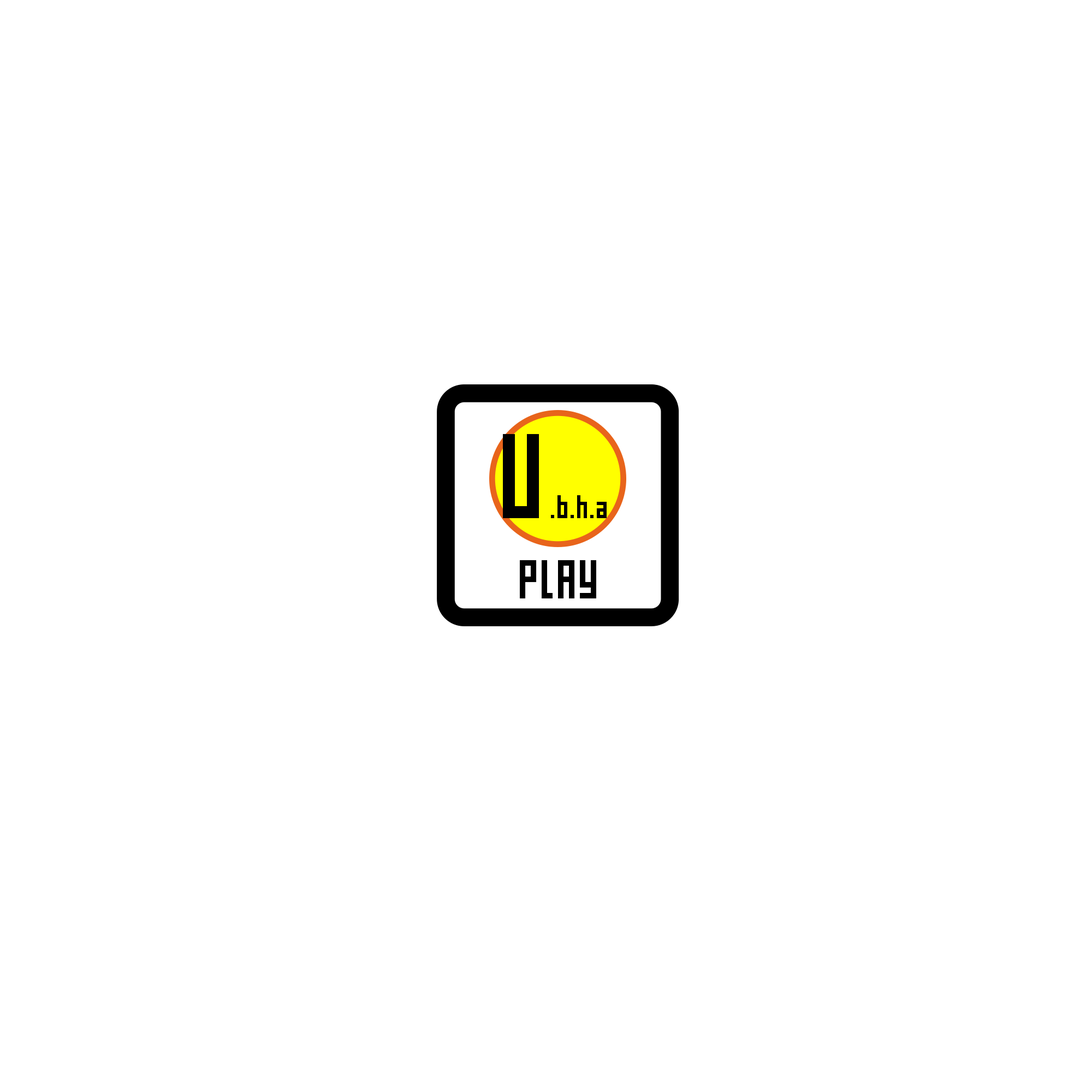
<style>
.page{position:relative;width:1092px;height:1092px;background:#ffffff}
.page>*{position:absolute;margin:0}
.t1{font:32.8px "pxl";color:#000000}
.t2{font:120.1px "pxl";color:#000000}
.t3{font:54.6px "pxl";color:#000000}
</style>
<div class="page">
<p class="t1" style="left:503px;top:434px;width:104px;height:84px"><span class="t2">U</span>.b.h.a</p>
<p class="t3" style="left:520px;top:560px;width:76px;height:38px">PLAY</p>
</div>
